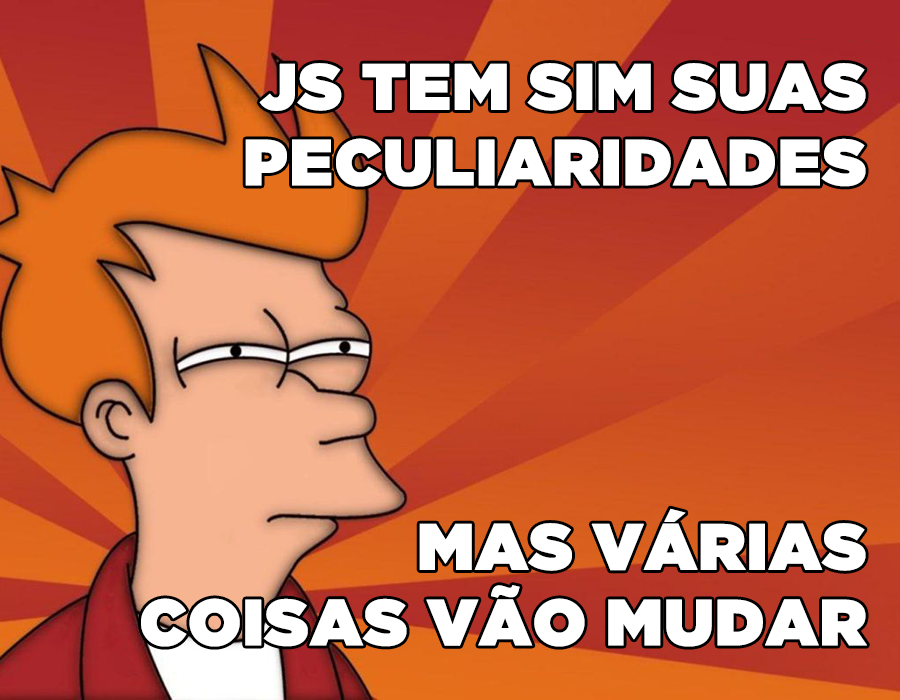
<style>
.page{position:relative;width:900px;height:700px}
.page>*{position:absolute;margin:0}
.t1{font:65px/75.7px "GothamUltra";color:#ffffff;font-weight:bold}
</style>
<div class="page">
<p class="t1" style="left:245px;top:63px;width:621px;height:124px;text-align:right">JS TEM SIM SUAS<br>PECULIARIDADES</p>
<p class="t1" style="left:141px;top:508px;width:726px;height:139px;text-align:right">MAS VÁRIAS<br>COISAS VÃO MUDAR</p>
</div>
